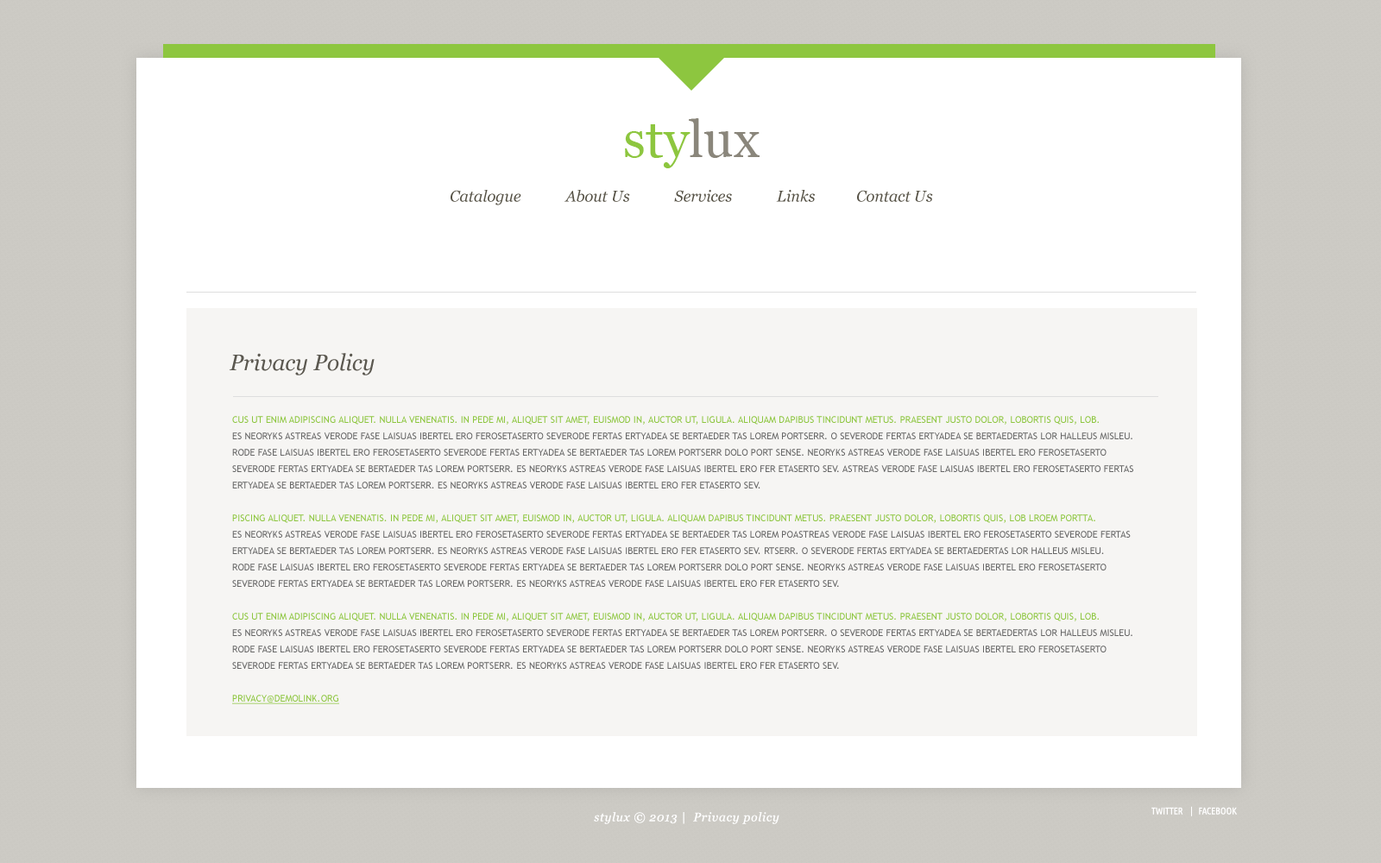
<style>
.page{position:relative;width:1381px;height:863px;background:#ffffff}
.page>*{position:absolute;margin:0}
.t1{font:51.8px "Georgia";color:#8dc63f}
.t2{font:51.8px "Georgia";color:#8a867b}
.t3{font:15.5px "Georgia-Italic";color:#565246}
.t4{font:22.4px "Georgia-Italic";color:#5b5850}
.t5{font:9.5px/16.4px "TrebuchetMS";color:#666666;text-transform:uppercase}
.t6{font:9.5px/16.4px "TrebuchetMS";color:#282722;text-transform:uppercase}
.t7{font:9.5px/16.4px "TrebuchetMS";color:#8dc63f;text-transform:uppercase}
.t8{font:9.5px/16.4px "TrebuchetMS";color:#8dc63f;text-transform:uppercase;text-decoration:underline}
.t9{font:9.5px "UbuntuCondensed-Regular";color:#ffffff;text-transform:uppercase}
.t10{font:12.1px "Georgia-Italic";letter-spacing:0.05em;color:#ffffff}
</style>
<div class="page">
<p class="t1" style="left:625px;top:118px;width:135px;height:50px">sty<span class="t2">lux</span></p>
<p class="t3" style="left:451px;top:190px;width:482px;height:15px">Catalogue            About Us            Services            Links           Contact Us</p>
<p class="t4" style="left:229px;top:353px;width:146px;height:23px">Privacy Policy</p>
<p class="t5" style="left:232px;top:416px;width:902px;height:288px"><span class="t6"><br></span><span class="t7">cus ut enim adipiscing aliquet. Nulla venenatis. In pede mi, aliquet sit amet, euismod in, auctor ut, ligula. Aliquam dapibus tincidunt metus. Praesent justo dolor, lobortis quis, lob.<br></span>es neoryks astreas verode fase laisuas ibertel ero ferosetaserto severode fertas ertyadea se bertaeder tas lorem portserr. o severode fertas ertyadea se bertaedertas lor halleus misleu.<br>rode fase laisuas ibertel ero ferosetaserto severode fertas ertyadea se bertaeder tas lorem portserr dolo port sense. neoryks astreas verode fase laisuas ibertel ero ferosetaserto severode fertas ertyadea se bertaeder tas lorem portserr. es neoryks astreas verode fase laisuas ibertel ero fer etaserto sev. astreas verode fase laisuas ibertel ero ferosetaserto fertas ertyadea se bertaeder tas lorem portserr. es neoryks astreas verode fase laisuas ibertel ero fer etaserto sev.<br><br><span class="t7">piscing aliquet. Nulla venenatis. In pede mi, aliquet sit amet, euismod in, auctor ut, ligula. Aliquam dapibus tincidunt metus. Praesent justo dolor, lobortis quis, lob lroem portta.<br></span>es neoryks astreas verode fase laisuas ibertel ero ferosetaserto severode fertas ertyadea se bertaeder tas lorem poastreas verode fase laisuas ibertel ero ferosetaserto severode fertas ertyadea se bertaeder tas lorem portserr. es neoryks astreas verode fase laisuas ibertel ero fer etaserto sev. rtserr. o severode fertas ertyadea se bertaedertas lor halleus misleu.<br>rode fase laisuas ibertel ero ferosetaserto severode fertas ertyadea se bertaeder tas lorem portserr dolo port sense. neoryks astreas verode fase laisuas ibertel ero ferosetaserto severode fertas ertyadea se bertaeder tas lorem portserr. es neoryks astreas verode fase laisuas ibertel ero fer etaserto sev.<br><br><span class="t7">cus ut enim adipiscing aliquet. Nulla venenatis. In pede mi, aliquet sit amet, euismod in, auctor ut, ligula. Aliquam dapibus tincidunt metus. Praesent justo dolor, lobortis quis, lob.<br></span>es neoryks astreas verode fase laisuas ibertel ero ferosetaserto severode fertas ertyadea se bertaeder tas lorem portserr. o severode fertas ertyadea se bertaedertas lor halleus misleu.<br>rode fase laisuas ibertel ero ferosetaserto severode fertas ertyadea se bertaeder tas lorem portserr dolo port sense. neoryks astreas verode fase laisuas ibertel ero ferosetaserto severode fertas ertyadea se bertaeder tas lorem portserr. es neoryks astreas verode fase laisuas ibertel ero fer etaserto sev.<br><br><span class="t8">privacy@demolink.org<br><br><br><br></span><span class="t7">piscing aliquet. Nulla venenatis. In pede mi, aliquet sit amet, euismod in, auctor ut, ligula. Aliquam dapibus tincidunt metus. Praesent justo dolor, lobortis quis, lob lroem portta.<br></span>es neoryks astreas verode fase laisuas ibertel ero ferosetaserto severode fertas ertyadea se bertaeder tas lorem portserr. o severode fertas ertyadea se bertaedertas lor halleus misleu.<br>rode fase laisuas ibertel ero ferosetaserto severode fertas ertyadea se bertaeder tas lorem portserr dolo port sense. neoryks astreas verode fase laisuas ibertel ero ferosetaserto severode fertas ertyadea se bertaeder tas lorem portserr. es neoryks astreas verode fase laisuas ibertel ero fer etaserto sev.<br><br><br>erode fertas ertyadea se bertaedertas lorem portserr.</p>
<p class="t9" style="left:1152px;top:806px;width:85px;height:11px">twitter    |   facebook</p>
<p class="t10" style="left:594px;top:812px;width:186px;height:12px">stylux © 2013 |  Privacy policy</p>
</div>
